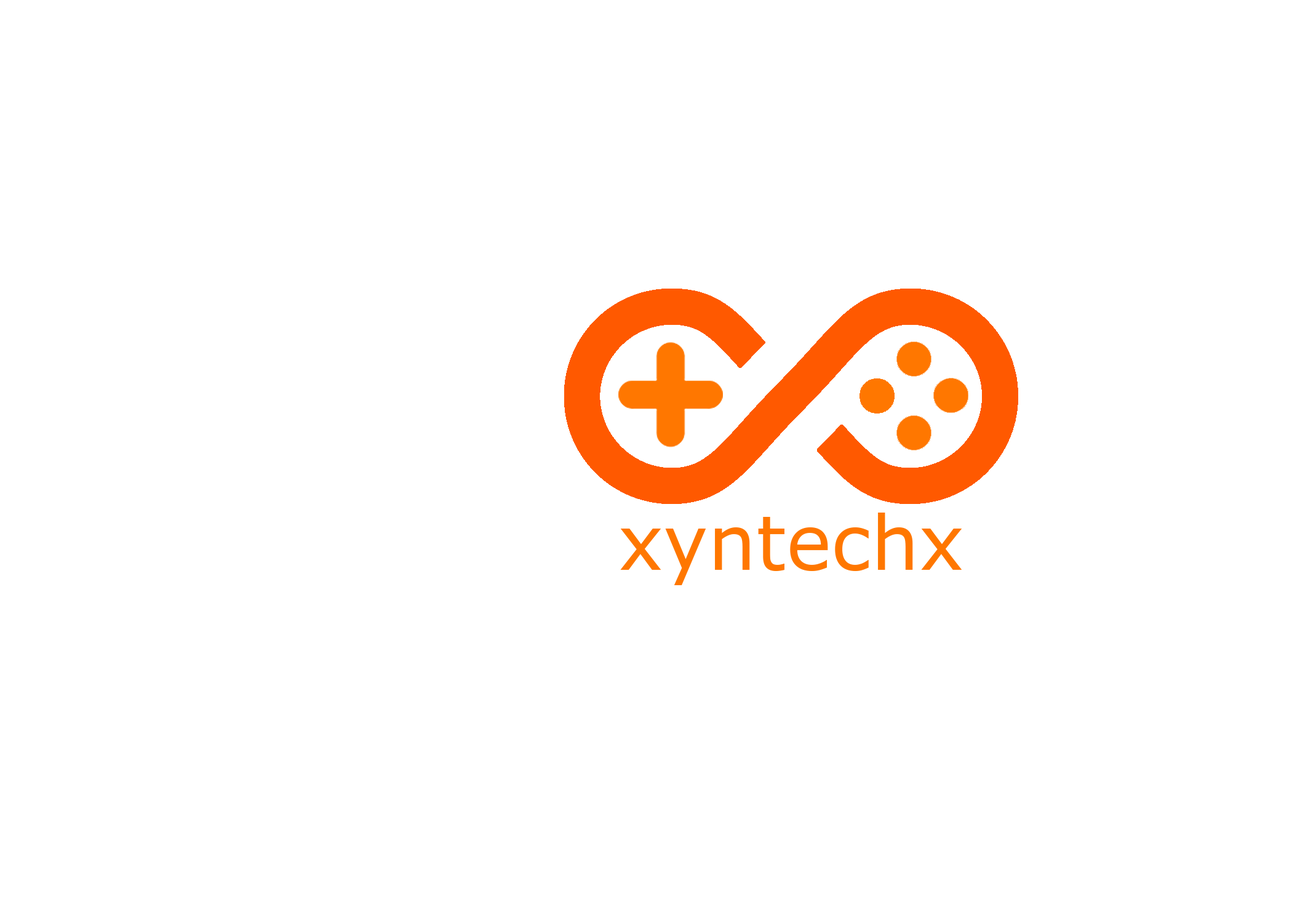
<style>
.page{position:relative;width:1292px;height:923px;background:#ffffff}
.page>*{position:absolute;margin:0}
.t1{font:76px "Verdana";color:#ff7700}
</style>
<div class="page">
<p class="t1" style="left:620px;top:513px;width:342px;height:72px">xyntechx</p>
</div>
